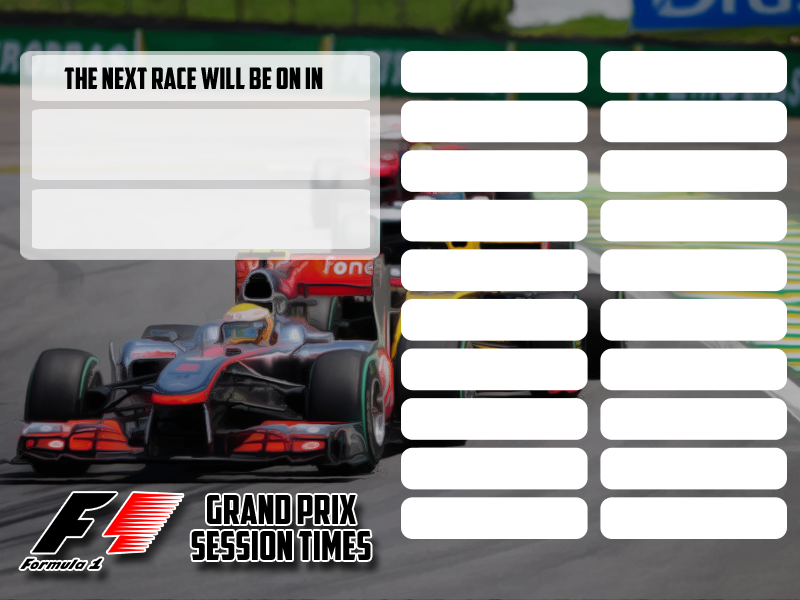
<style>
.page{position:relative;width:800px;height:600px;background:#ffffff}
.page>*{position:absolute;margin:0}
.t1{font:29.5px "AmericanCaptain";color:#000000}
.t2{font:40px/36px "AmericanCaptain";color:#000000}
</style>
<div class="page">
<p class="t1" style="left:64px;top:67px;width:259px;height:22px">THE NEXT RACE WILL BE ON IN</p>
<p class="t2" style="left:191px;top:495px;width:180px;height:65px;text-align:center">GRAND PRIX<br>SESSION TIMES</p>
</div>
